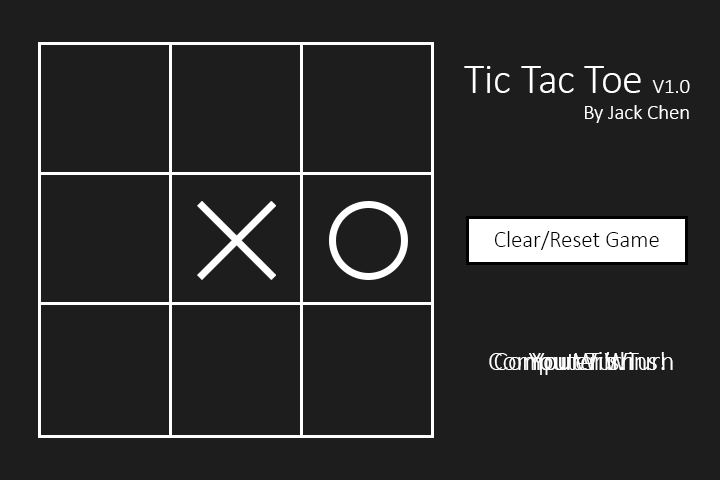
<style>
.page{position:relative;width:720px;height:480px;background:#1d1d1d}
.page>*{position:absolute;margin:0}
.t1{font:20.8px/26px "Calibri-Light";color:#ffffff}
.t2{font:41.7px/26px "Calibri-Light";color:#ffffff}
.t3{font:22.9px "Calibri-Light";color:#000000}
.t4{font:27.1px "Calibri-Light";color:#ffffff}
</style>
<div class="page">
<p class="t1" style="left:464px;top:66px;width:226px;height:57px;text-align:right"><span class="t2">Tic Tac Toe </span>V1.0<br>By Jack Chen</p>
<p class="t3" style="left:494px;top:231px;width:165px;height:19px">Clear/Reset Game</p>
<p class="t3" style="left:494px;top:231px;width:165px;height:19px">Clear/Reset Game</p>
<p class="t4" style="left:489px;top:352px;width:176px;height:23px">Computer Wins!</p>
<p class="t4" style="left:494px;top:352px;width:179px;height:23px">Computer’s Turn</p>
<p class="t4" style="left:529px;top:352px;width:95px;height:18px">You Win!</p>
<p class="t4" style="left:532px;top:353px;width:101px;height:17px">Your Turn</p>
</div>
